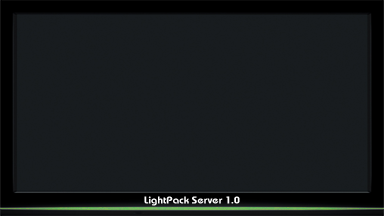
<style>
.page{position:relative;width:384px;height:216px;background:#181c1f}
.page>*{position:absolute;margin:0}
.t1{font:10px "BauhausLightCTT-Bold";color:#ffffff;scale:1.12 1}
</style>
<div class="page">
<p class="t1" style="left:144px;top:196px;width:96px;height:10px">LightPack Server 1.0</p>
</div>
